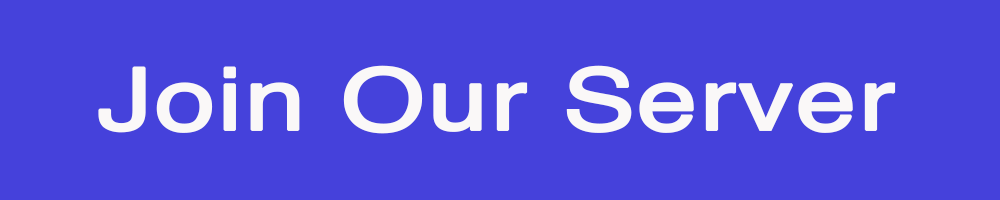
<style>
.page{position:relative;width:1000px;height:200px;background:#4542db}
.page>*{position:absolute;margin:0}
.t1{font:86.1px "Helvetica";letter-spacing:0.002em;color:#faf8f8;font-weight:bold;scale:1.25 1}
</style>
<div class="page">
<p class="t1" style="left:98px;top:65px;width:798px;height:69px">Join Our Server</p>
</div>
